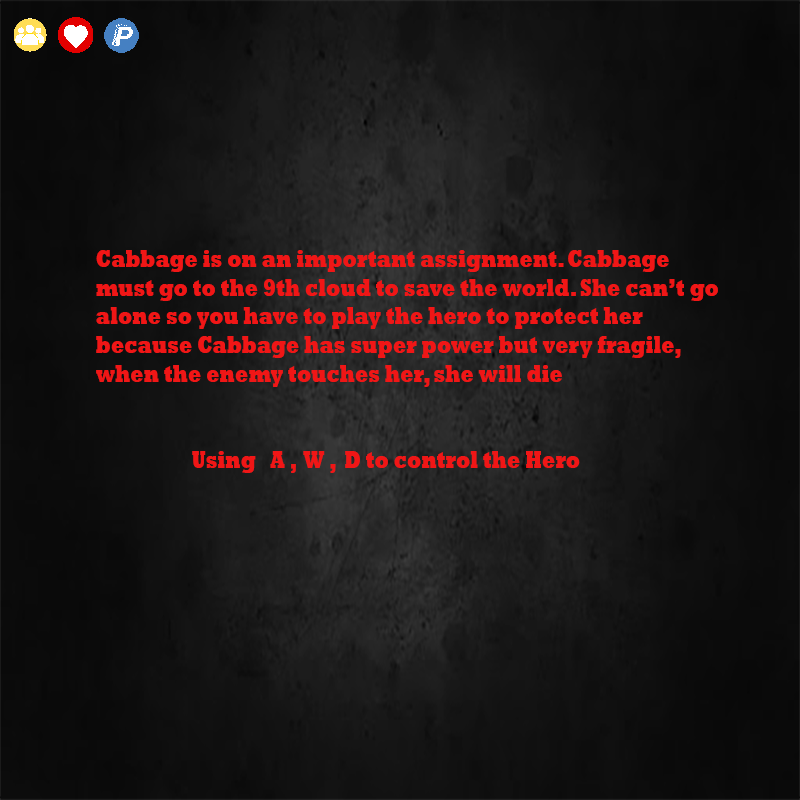
<style>
.page{position:relative;width:800px;height:800px}
.page>*{position:absolute;margin:0}
.t1{font:24px "Rockwell-ExtraBold";color:#f01616;scale:0.8 1}
</style>
<div class="page">
<p class="t1" style="left:96px;top:250px;width:622px;height:223px">Cabbage is on an important assignment. Cabbage <br>must go to the 9th cloud to save the world. She can’t go<br>alone so you have to play the hero to protect her <br>because Cabbage has super power but very fragile,<br>when the enemy touches her, she will die<br><br><br>       Using   A ,  W ,  D to control the Hero</p>
</div>
